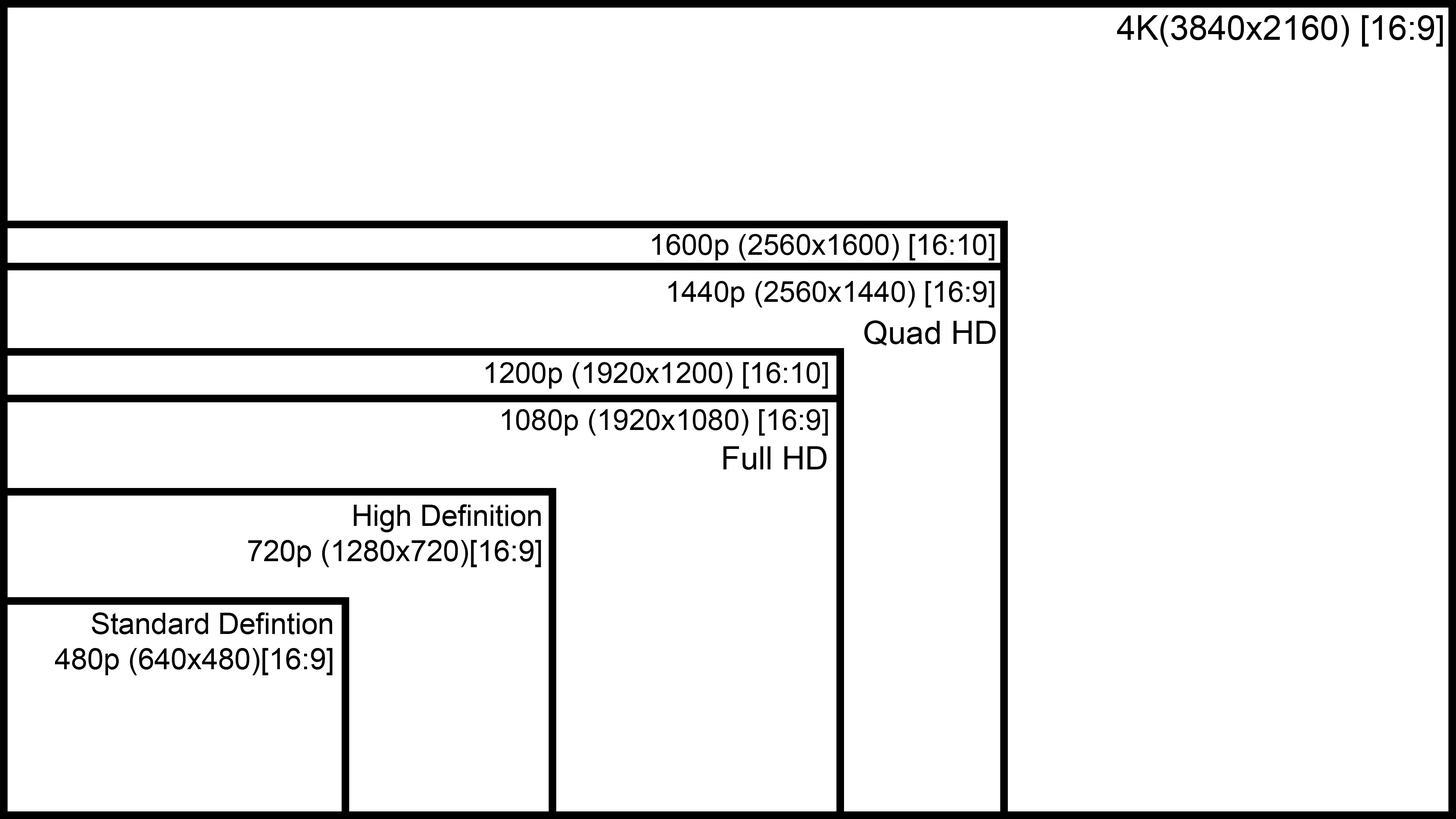
<style>
.page{position:relative;width:1456px;height:819px;background:#ffffff}
.page>*{position:absolute;margin:0}
.t1{font:34.1px "ArialMT";color:#000000}
.t2{font:28.9px "ArialMT";color:#000000}
.t3{font:32.3px "ArialMT";color:#000000}
.t4{font:29.4px "ArialMT";color:#000000}
</style>
<div class="page">
<p class="t1" style="left:1117px;top:15px;width:326px;height:32px">4K(3840x2160) [16:9]</p>
<p class="t2" style="left:652px;top:234px;width:343px;height:26px">1600p (2560x1600) [16:10]</p>
<p class="t2" style="left:668px;top:281px;width:327px;height:27px">1440p (2560x1440) [16:9]</p>
<p class="t3" style="left:864px;top:320px;width:132px;height:26px">Quad HD</p>
<p class="t2" style="left:486px;top:362px;width:342px;height:27px">1200p (1920x1200) [16:10]</p>
<p class="t2" style="left:502px;top:409px;width:326px;height:27px">1080p (1920x1080) [16:9]</p>
<p class="t3" style="left:723px;top:446px;width:104px;height:24px">Full HD</p>
<p class="t4" style="left:248px;top:504px;width:293px;height:63px;text-align:right">High Definition<br>720p (1280x720)[16:9] [16:9</p>
<p class="t4" style="left:55px;top:612px;width:278px;height:63px;text-align:right">Standard Defintion<br>480p (640x480)[16:9] [16:9</p>
</div>
